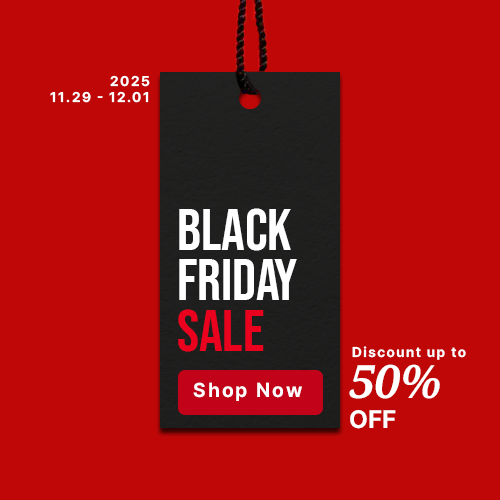
<style>
.page{position:relative;width:500px;height:500px;background:#bf0707}
.page>*{position:absolute;margin:0}
.t1{font:14px "Pretendard-Bold";letter-spacing:0.1em;color:#ffffff}
.t2{font:58.8px/50.4px "BebasNeue-Regular";color:#ffffff}
.t3{font:58.8px/50.4px "BebasNeue-Regular";letter-spacing:-0.1em;color:#ffffff}
.t4{font:58.8px/50.4px "BebasNeue-Regular";color:#ea011e}
.t5{font:25px "Pretendard-Bold";color:#ffffff;text-transform:uppercase}
.t6{font:46px "NotoSerif-BoldItalic";color:#ffffff}
.t7{font:46px "NotoSerif-BoldItalic";letter-spacing:0.1em;color:#ffffff}
.t8{font:20px "Pretendard-Bold";letter-spacing:0.1em;color:#ffffff}
</style>
<div class="page">
<p class="t1" style="left:50px;top:75px;width:100px;height:28px;text-align:right">2025<br>11.29 - 12.01</p>
<p class="t2" style="left:178px;top:208px;width:119px;height:144px">BLACK<br>FRID<span class="t3">AY<br></span><span class="t4">SALE</span></p>
<p class="t1" style="left:352px;top:346px;width:114px;height:14px">Discount up to</p>
<p class="t5" style="left:349px;top:364px;width:91px;height:65px"><span class="t6">50</span><span class="t7">%<br></span>off</p>
<p class="t8" style="left:193px;top:382px;width:109px;height:19px">Shop Now</p>
</div>
